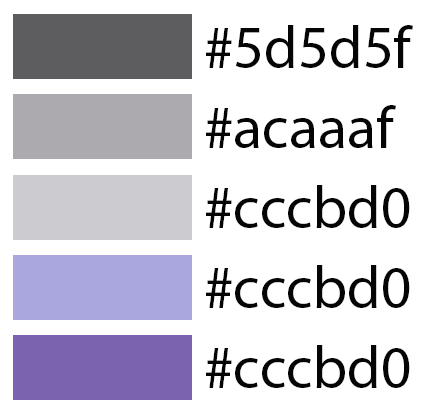
<style>
.page{position:relative;width:424px;height:415px;background:#ffffff}
.page>*{position:absolute;margin:0}
.t1{font:60px "MyriadPro-Regular";color:#050505}
</style>
<div class="page">
<p class="t1" style="left:206px;top:25px;width:207px;height:43px">#5d5d5f</p>
<p class="t1" style="left:206px;top:105px;width:190px;height:43px">#acaaaf</p>
<p class="t1" style="left:206px;top:185px;width:204px;height:43px">#cccbd0</p>
<p class="t1" style="left:206px;top:265px;width:204px;height:43px">#cccbd0</p>
<p class="t1" style="left:206px;top:345px;width:204px;height:43px">#cccbd0</p>
</div>
